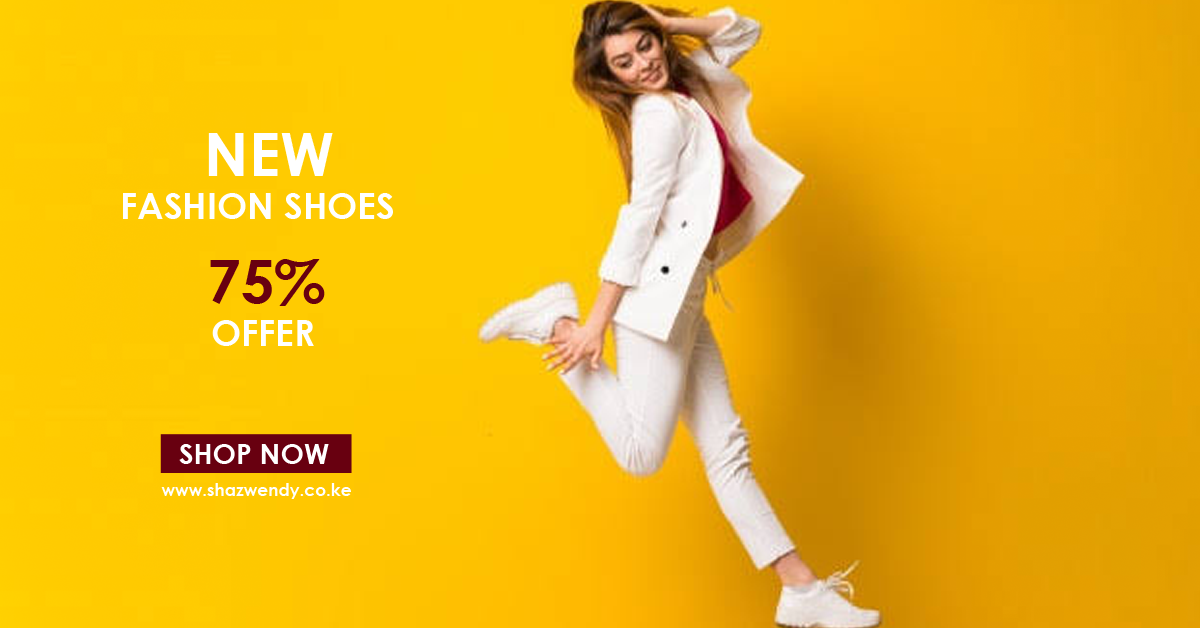
<style>
.page{position:relative;width:1200px;height:628px}
.page>*{position:absolute;margin:0}
.t1{font:36px "CenturyGothic-Bold";color:#ffffff}
.t2{font:60px "CenturyGothic-Bold";color:#ffffff}
.t3{font:60px "CenturyGothic-Bold";color:#680010}
.t4{font:28px "CenturyGothic-Bold";color:#ffffff}
.t5{font:17px "CenturyGothic-Bold";color:#ffffff}
</style>
<div class="page">
<p class="t1" style="left:123px;top:133px;width:270px;height:86px"><span class="t2">     NEW<br></span>     FASHION SHOES</p>
<p class="t1" style="left:210px;top:259px;width:115px;height:87px"><span class="t2">     </span><span class="t3">75%<br></span>      OFFER</p>
<p class="t4" style="left:179px;top:444px;width:150px;height:20px">SHOP NOW</p>
<p class="t5" style="left:161px;top:483px;width:190px;height:16px">www.shazwendy.co.ke</p>
</div>
